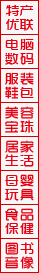
<style>
.page{position:relative;width:39px;height:273px;background:#f7f7f7}
.page>*{position:absolute;margin:0}
.t1{font:14px/14px "TRENDS";color:#e60012}
.t2{font:14px/14px "TRENDS";letter-spacing:0.075em;color:#e60012}
</style>
<div class="page">
<p class="t1" style="left:6px;top:5px;width:28px;height:26px;text-align:center">特产<br>优联</p>
<p class="t2" style="left:5px;top:39px;width:29px;height:26px;text-align:center">电脑<br>数码</p>
<p class="t2" style="left:5px;top:72px;width:29px;height:27px;text-align:center">服装<br>鞋包</p>
<p class="t2" style="left:5px;top:106px;width:29px;height:27px;text-align:center">美容<br>宝珠</p>
<p class="t2" style="left:5px;top:140px;width:29px;height:27px;text-align:center">居家<br>生活</p>
<p class="t2" style="left:5px;top:174px;width:29px;height:27px;text-align:center">母婴<br>玩具</p>
<p class="t2" style="left:5px;top:208px;width:29px;height:26px;text-align:center">食品<br>保健</p>
<p class="t2" style="left:5px;top:242px;width:29px;height:27px;text-align:center">图书<br>音像</p>
</div>
